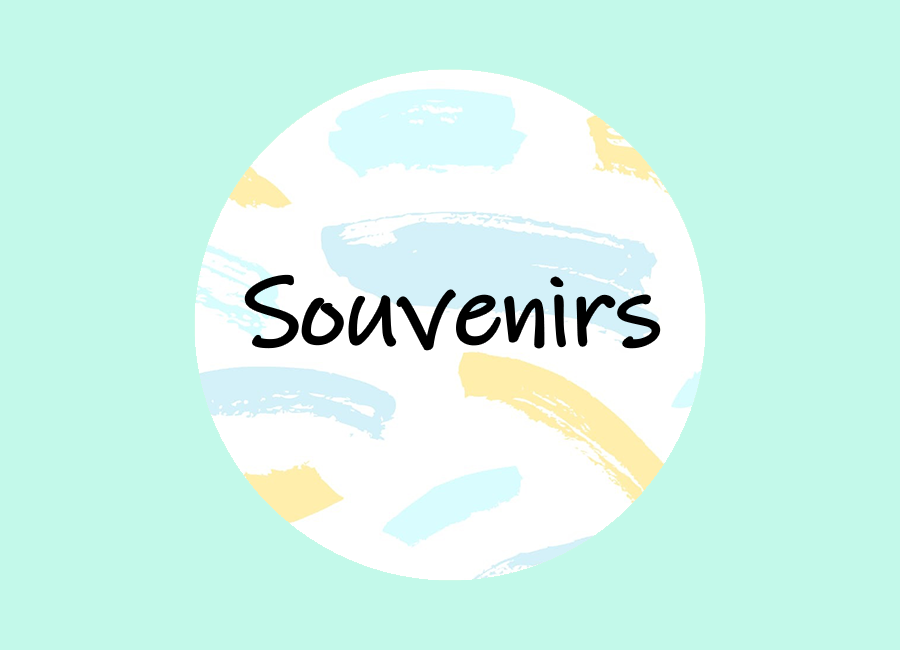
<style>
.page{position:relative;width:900px;height:650px;background:#c3f9ea}
.page>*{position:absolute;margin:0}
.t1{font:95px "InkFree";color:#000000;scale:1.1 1}
</style>
<div class="page">
<p class="t1" style="left:246px;top:276px;width:413px;height:73px">Souvenirs</p>
</div>
